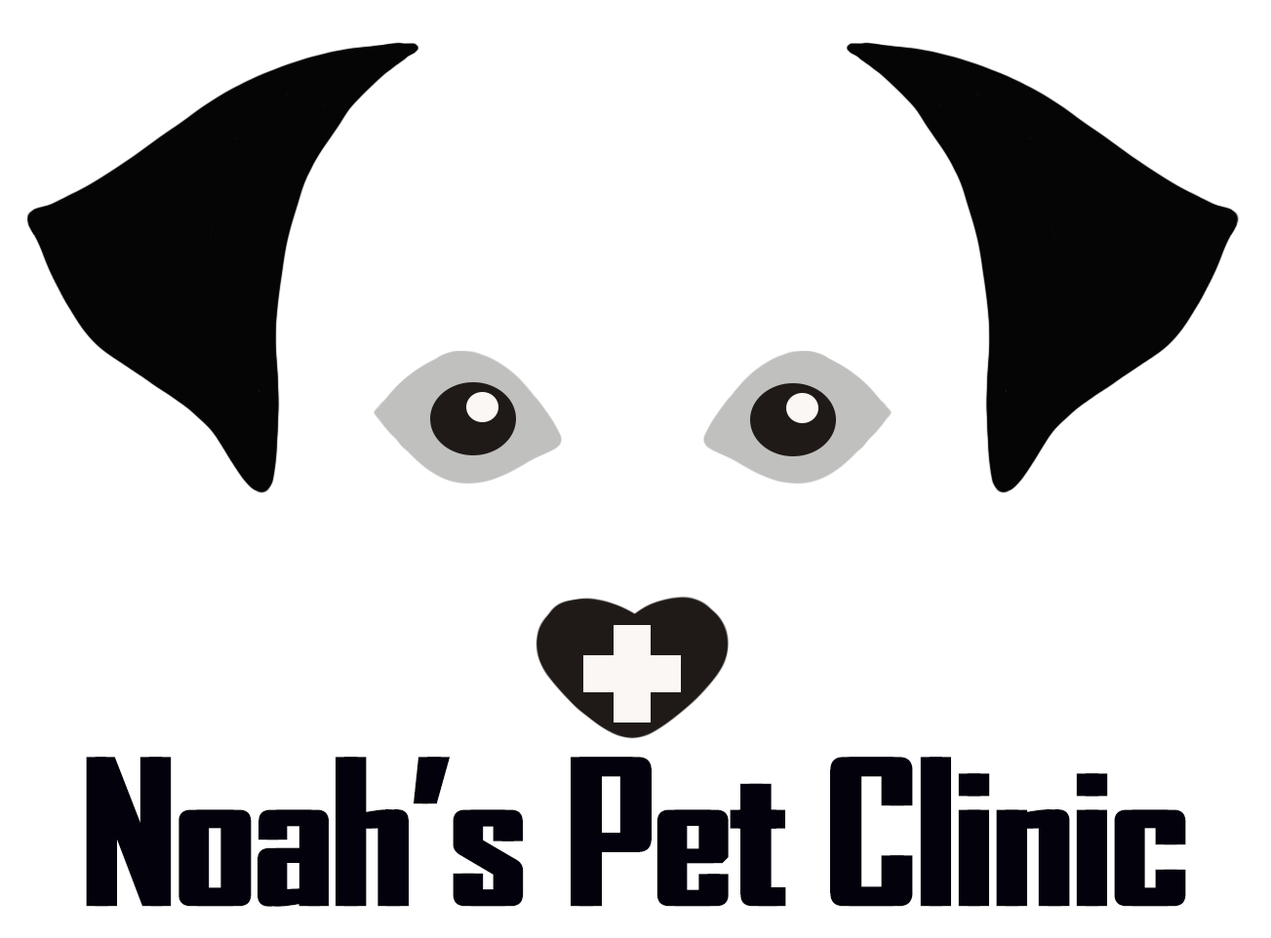
<style>
.page{position:relative;width:1271px;height:938px;background:#ffffff}
.page>*{position:absolute;margin:0}
.t1{font:195.1px "AgencyFB-Bold";color:#03010b}
</style>
<div class="page">
<p class="t1" style="left:86px;top:757px;width:1091px;height:150px">Noah’s Pet Clinic</p>
<p class="t1" style="left:95px;top:757px;width:1091px;height:150px">Noah’s Pet Clinic</p>
</div>
